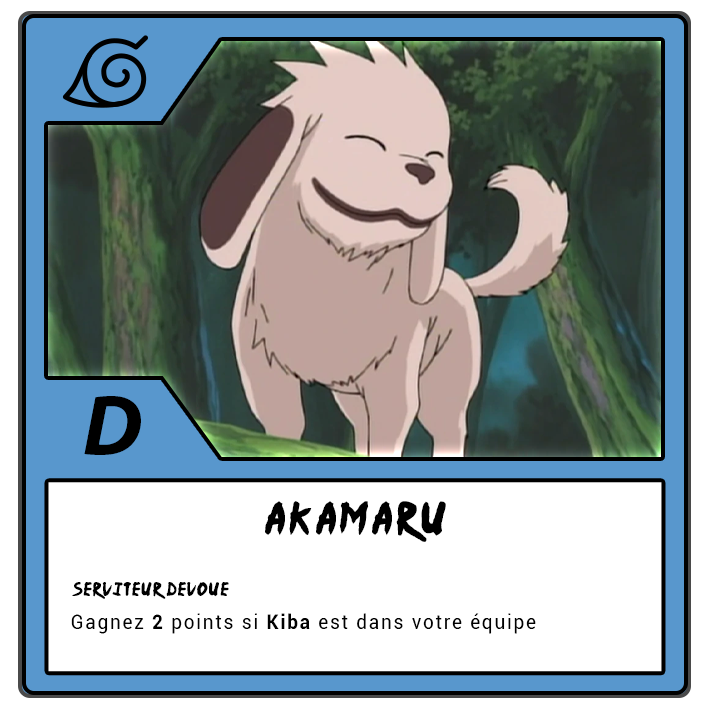
<style>
.page{position:relative;width:709px;height:709px;background:#ffffff}
.page>*{position:absolute;margin:0}
.t1{font:87.5px "MyriadPro-BoldIt";letter-spacing:-0.12em;color:#000000}
.t2{font:37.5px "Ninja-Naruto";letter-spacing:0.1em;color:#000000}
.t3{font:15.4px "Ninja-Naruto";letter-spacing:0.07em;color:#000000}
.t4{font:20.8px "Roboto-Regular";letter-spacing:0.1em;color:#000000;scale:0.9 1}
.t5{font:20.8px "Roboto-Bold";letter-spacing:0.1em;color:#000000;scale:0.9 1}
</style>
<div class="page">
<p class="t1" style="left:84px;top:396px;width:57px;height:59px">D</p>
<p class="t2" style="left:265px;top:501px;width:181px;height:41px">Akamaru</p>
<p class="t3" style="left:72px;top:582px;width:157px;height:17px">Serviteur DEVOUE</p>
<p class="t4" style="left:71px;top:613px;width:465px;height:21px">Gagnez <span class="t5">2 </span>points si <span class="t5">Kiba </span>est dans votre équipe</p>
</div>
